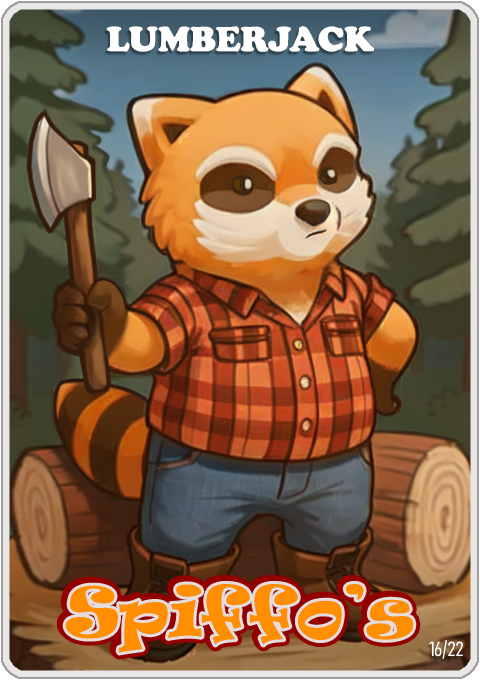
<style>
.page{position:relative;width:480px;height:680px}
.page>*{position:absolute;margin:0}
.t1{font:36px "CooperBlack";color:#ffffff}
.t2{font:65px "Ravie";color:#ff8e00}
.t3{font:20px "Bahnschrift-LightCondensed";color:#ffffff}
</style>
<div class="page">
<p class="t1" style="left:106px;top:26px;width:268px;height:26px">LUMBERJACK</p>
<p class="t2" style="left:65px;top:584px;width:349px;height:69px">Spiffo’s</p>
<p class="t3" style="left:429px;top:640px;width:34px;height:19px">16/22</p>
</div>
